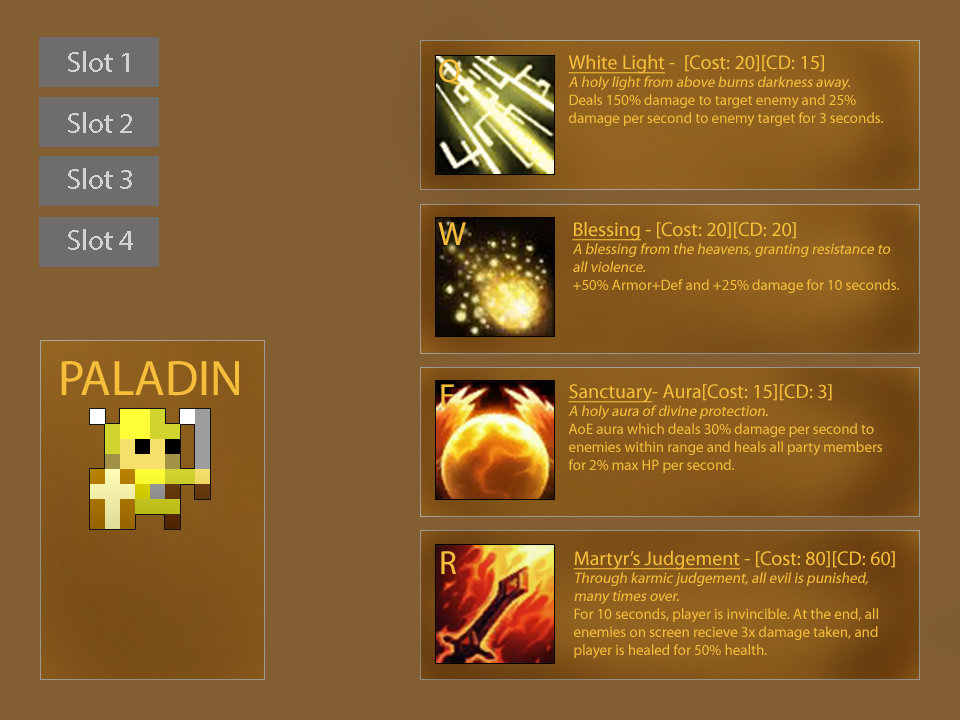
<style>
.page{position:relative;width:960px;height:720px;background:#835e33}
.page>*{position:absolute;margin:0}
.t1{font:29.2px "MyriadPro-Regular";color:#d2d2d2}
.t2{font:125px "MyriadPro-Regular";color:#ffffff}
.t3{font:15px "MyriadPro-Regular";color:#f6be3a}
.t4{font:20px "MyriadPro-Regular";color:#f6be3a;text-decoration:underline}
.t5{font:20px "MyriadPro-Regular";color:#f6be3a}
.t6{font:15px "MyriadPro-Regular";color:#f6be3a;font-style:italic}
.t7{font:33.2px "MyriadPro-Regular";color:#f6be3a}
.t8{font:50px "MyriadPro-Regular";color:#f6be3a}
</style>
<div class="page">
<p class="t1" style="left:68px;top:51px;width:61px;height:21px;text-align:center">Slot 1<br><span class="t2">hERO</span></p>
<p class="t3" style="left:568px;top:54px;width:315px;height:72px"><span class="t4">White Light</span><span class="t5"> -  [Cost: 20][CD: 15]<br></span><span class="t6">A holy light from above burns darkness away.<br></span>Deals 150% damage to target enemy and 25% damage per second to enemy target for 3 seconds.</p>
<p class="t7" style="left:439px;top:59px;width:21px;height:27px">Q</p>
<p class="t1" style="left:68px;top:112px;width:64px;height:21px;text-align:center">Slot 2<br><span class="t2">hERO</span></p>
<p class="t1" style="left:68px;top:168px;width:64px;height:21px;text-align:center">Slot 3<br><span class="t2">hERO</span></p>
<p class="t7" style="left:438px;top:222px;width:28px;height:23px">W</p>
<p class="t6" style="left:572px;top:221px;width:327px;height:72px"><span class="t4">Blessing</span><span class="t5"> - [Cost: 20][CD: 20]<br></span>A blessing from the heavens, granting resistance to all violence.<br><span class="t3">+50% Armor+Def and +25% damage for 10 seconds.</span></p>
<p class="t1" style="left:68px;top:229px;width:65px;height:21px;text-align:center">Slot 4<br><span class="t2">hERO</span></p>
<p class="t8" style="left:61px;top:361px;width:178px;height:35px">PALADIN</p>
<p class="t7" style="left:441px;top:384px;width:14px;height:23px">E</p>
<p class="t3" style="left:568px;top:384px;width:314px;height:89px"><span class="t4">Sanctuary</span><span class="t5">- Aura[Cost: 15][CD: 3]<br></span><span class="t6">A holy aura of divine protection.<br></span>AoE aura which deals 30% damage per second to enemies within range and heals all party members for 2% max HP per second.</p>
<p class="t7" style="left:441px;top:551px;width:15px;height:23px">R</p>
<p class="t3" style="left:573px;top:550px;width:322px;height:108px"><span class="t4">Martyr’s Judgement</span><span class="t5"> - [Cost: 80][CD: 60]<br></span><span class="t6">Through karmic judgement, all evil is punished, many times over.<br></span>For 10 seconds, player is invincible. At the end, all enemies on screen recieve 3x damage taken, and player is healed for 50% health.</p>
</div>
